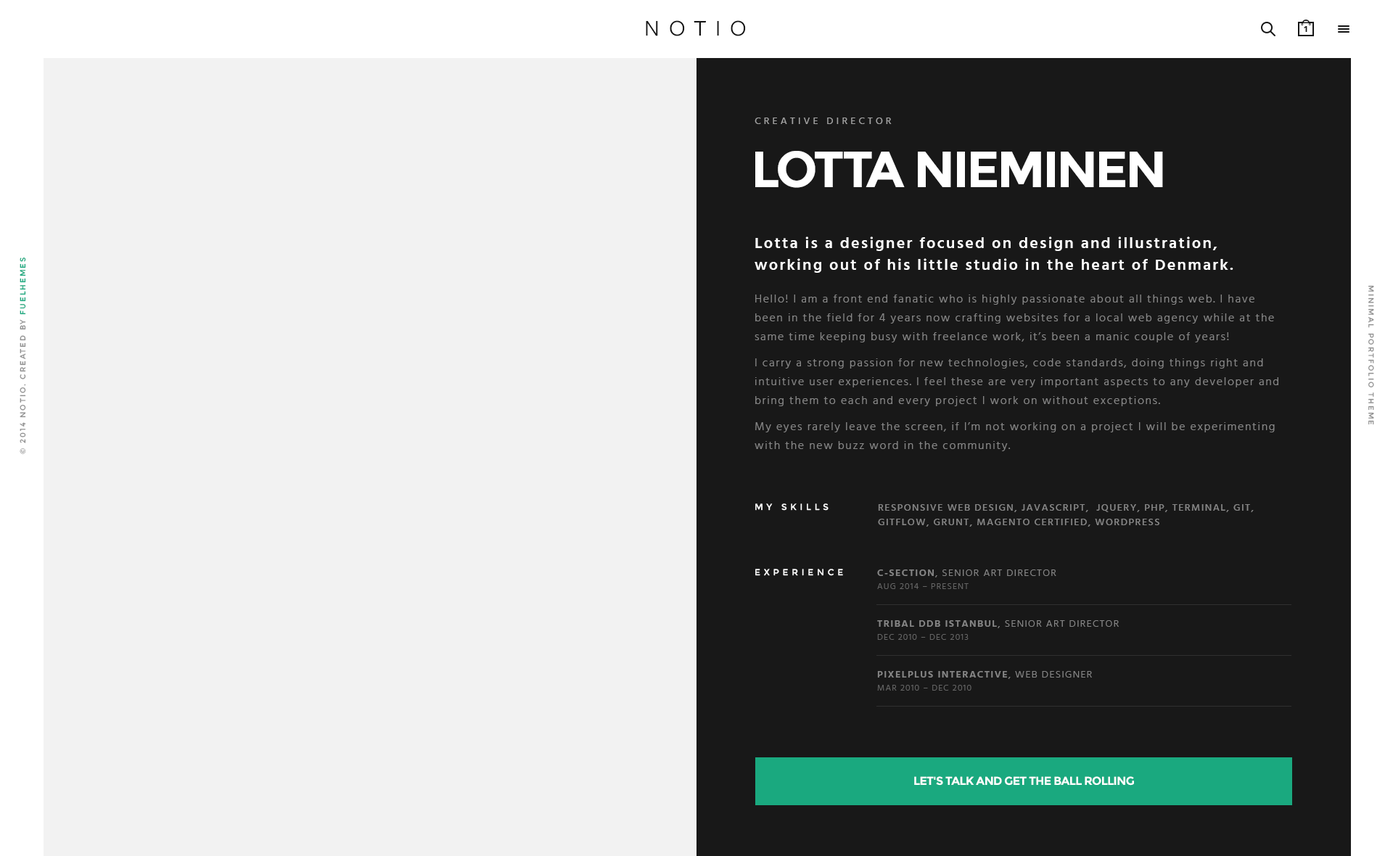
<style>
.page{position:relative;width:1393px;height:856px;background:#f2f2f2}
.page>*{position:absolute;margin:0}
.t1{font:23.2px "FreightSansProBook-Regular";letter-spacing:0.4em;color:#121212}
.t2{font:8.7px "Hind-Bold";letter-spacing:0.2em;color:#151515;text-transform:uppercase}
.t3{font:9.9px "Hind-Regular";letter-spacing:0.3em;color:#a3a3a3}
.t4{font:50.8px "Montserrat-Bold";letter-spacing:-0.04em;color:#ffffff;text-transform:uppercase}
.t5{font:16px/21.8px "Hind-Semibold";letter-spacing:0.1em;color:#ffffff}
.t6{font:7.4px "Montserrat-Regular";letter-spacing:0.2em;color:#909090;text-transform:uppercase}
.t7{font:7.4px "Montserrat-Regular";letter-spacing:0.2em;color:#1aa97f;text-transform:uppercase}
.t8{font:7.3px "Montserrat-Regular";letter-spacing:0.2em;color:#909090}
.t9{font:11.6px/18.9px "Hind-Light";letter-spacing:0.1em;color:#868686}
.t10{font:11.6px/26.1px "Hind-Light";letter-spacing:0.1em;color:#868686}
.t11{font:8.7px "Montserrat-Regular";letter-spacing:0.4em;color:#ffffff}
.t12{font:10.2px/14.5px "Hind-Medium";letter-spacing:0.1em;color:#868686;text-transform:uppercase}
.t13{font:10.2px "Hind-Light";letter-spacing:0.1em;color:#868686;text-transform:uppercase}
.t14{font:10.2px "Hind-Semibold";letter-spacing:0.1em;color:#868686;text-transform:uppercase}
.t15{font:8.7px "Hind-Light";letter-spacing:0.1em;color:#656565;text-transform:uppercase}
.t16{font:11.6px "Montserrat-Bold";letter-spacing:-0.04em;color:#ffffff;text-transform:uppercase}
</style>
<div class="page">
<p class="t1" style="left:646px;top:20px;width:100px;height:16px">NOTIO</p>
<p class="t2" style="left:1304px;top:26px;width:3px;height:6px">1</p>
<p class="t3" style="left:754px;top:118px;width:138px;height:6px">CREATIVE DIRECTOR</p>
<p class="t4" style="left:755px;top:151px;width:408px;height:37px">Lotta Nieminen</p>
<p class="t5" style="left:754px;top:237px;width:479px;height:36px">Lotta is a designer focused on design and illustration, <br>working out of his little studio in the heart of Denmark.</p>
<p class="t6" style="left:20px;top:258px;width:6px;height:196px;rotate:-90deg">© 2014 NOTIO. Created by <span class="t7">FUELhemes</span></p>
<p class="t8" style="left:1368px;top:285px;width:6px;height:140px;rotate:90deg">MINIMAL PORTFOLIO THEME</p>
<p class="t9" style="left:754px;top:295px;width:524px;height:156px;text-align:right">Hello! I am a front end fanatic who is highly passionate about all things web. I have <br>been in the field for 4 years now crafting websites for a local web agency while at the <br>same time keeping busy with freelance work, it’s been a manic couple of years!<br><span class="t10">I carry a strong passion for new technologies, code standards, doing things </span>right and <br>intuitive user experiences. I feel these are very important aspects to any developer and <br>bring them to each and every project I work on without exceptions.<br><span class="t10">My eyes rarely leave the screen, if I’m not working on a project I will be experimenting <br></span>with the new buzz word in the community.</p>
<p class="t11" style="left:755px;top:503px;width:73px;height:8px">MY SKILLS</p>
<p class="t12" style="left:878px;top:504px;width:376px;height:23px;text-align:right">Responsive Web Design, JavaScript,  jQuery, PHP, Terminal, Git,<br>GitFlow, Grunt, Magento Certified, WordPress</p>
<p class="t11" style="left:755px;top:569px;width:88px;height:7px">EXPERIENCE</p>
<p class="t13" style="left:877px;top:570px;width:179px;height:7px"><span class="t14">C-Section</span>, Senior Art Director</p>
<p class="t15" style="left:877px;top:583px;width:92px;height:6px">Aug 2014 – Present</p>
<p class="t13" style="left:877px;top:620px;width:242px;height:8px"><span class="t14">Tribal DDB Istanbul</span>, Senior Art Director</p>
<p class="t15" style="left:877px;top:634px;width:92px;height:6px">Dec 2010 – Dec 2013</p>
<p class="t14" style="left:877px;top:671px;width:215px;height:8px">Pixelplus Interactive<span class="t13">, Web DESIGNER</span></p>
<p class="t15" style="left:877px;top:685px;width:94px;height:6px">Mar 2010 – Dec 2010</p>
<p class="t16" style="left:914px;top:776px;width:220px;height:10px">Let's talk and get the ball rolling</p>
</div>
